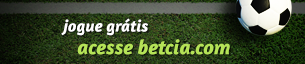
<style>
.page{position:relative;width:305px;height:64px}
.page>*{position:absolute;margin:0}
.t1{font:20.7px/22.7px "Amaranth-BoldItalic";color:#b5e357}
.t2{font:16.5px/22.7px "Amaranth-BoldItalic";color:#ffffff}
</style>
<div class="page">
<p class="t1" style="left:61px;top:18px;width:169px;height:37px"><span class="t2">jogue grátis<br> </span>acesse betcia.com</p>
</div>
